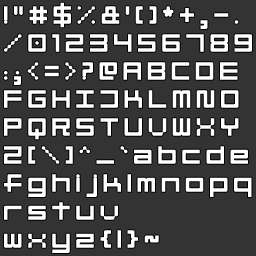
<style>
.page{position:relative;width:256px;height:256px;background:#333333}
.page>*{position:absolute;margin:0}
.t1{font:56.2px/28px "Linesquare-Rounded-Extended";letter-spacing:0.085em;color:#ffffff}
</style>
<div class="page">
<p class="t1" style="left:4px;top:2px;width:248px;height:251px">!"#$%&amp;'()*+,-.<br>/0123456789<br>:;&lt;=&gt;?@ABCDE<br>FGHIJKLMNO<br>PQRSTUVWXY<br>Z[\]^_`abcde<br>fghijklmnopq<br>rstuv<br>wxyz{|}~</p>
</div>
